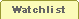
<style>
.page{position:relative;width:79px;height:19px;background:#fbfbb9}
.page>*{position:absolute;margin:0}
.t1{font:9px "Arial-BoldMT";letter-spacing:0.05em;color:#666666;font-weight:bold}
</style>
<div class="page">
<p class="t1" style="left:12px;top:6px;width:53px;height:7px">Watchlist</p>
</div>
